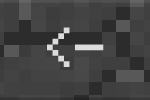
<style>
.page{position:relative;width:150px;height:100px}
.page>*{position:absolute;margin:0}
.t1{font:45px "Minecraftia";color:#dcdcdc}
</style>
<div class="page">
<p class="t1" style="left:47px;top:27px;width:57px;height:40px">&lt;-</p>
</div>
